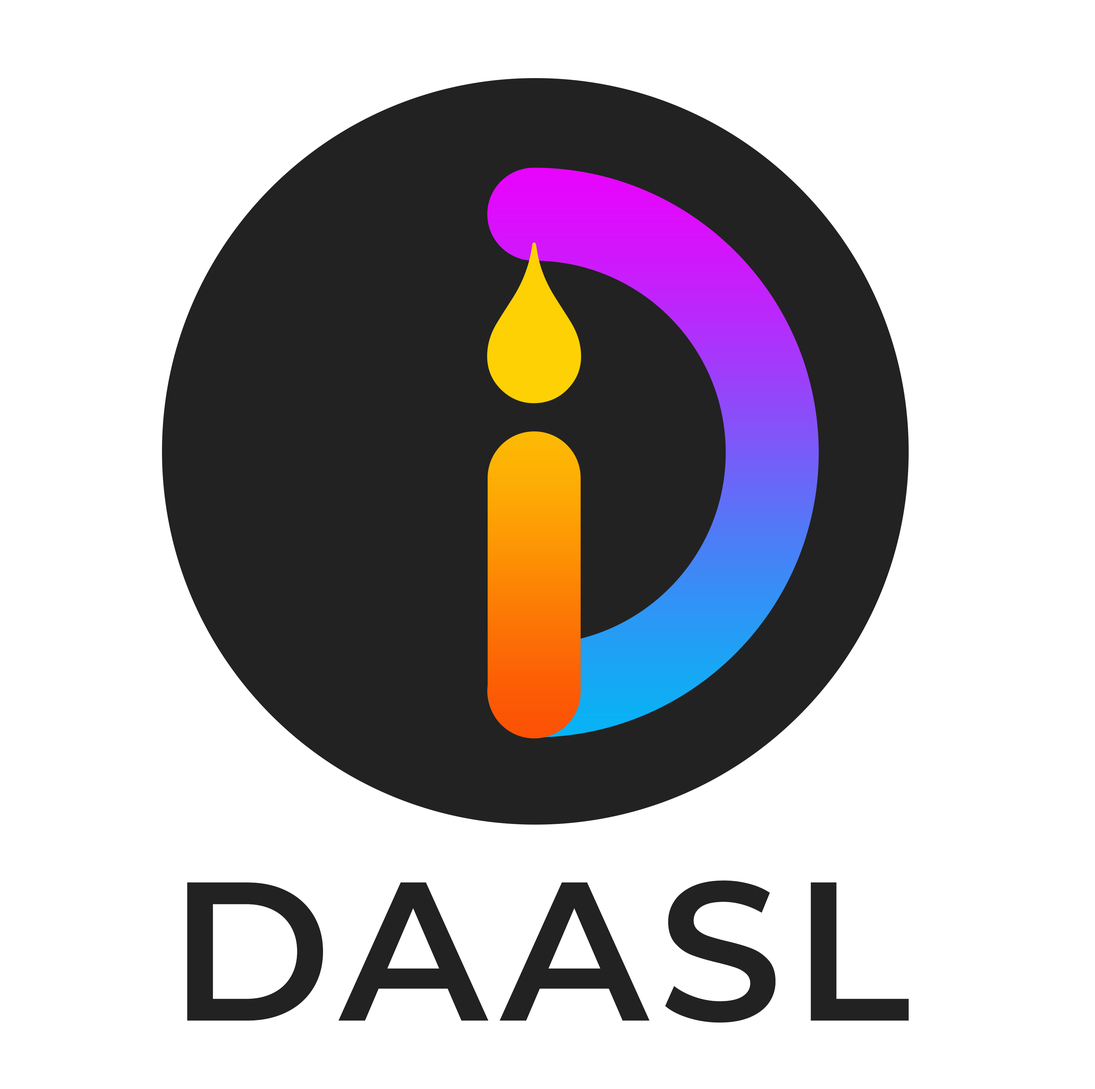
<style>
.page{position:relative;width:1095px;height:1089px;background:#ffffff}
.page>*{position:absolute;margin:0}
.t1{font:197.2px "Montserrat-SemiBold";letter-spacing:0.05em;color:#222222;text-transform:uppercase}
</style>
<div class="page">
<p class="t1" style="left:187px;top:880px;width:722px;height:143px">dAasl</p>
</div>
